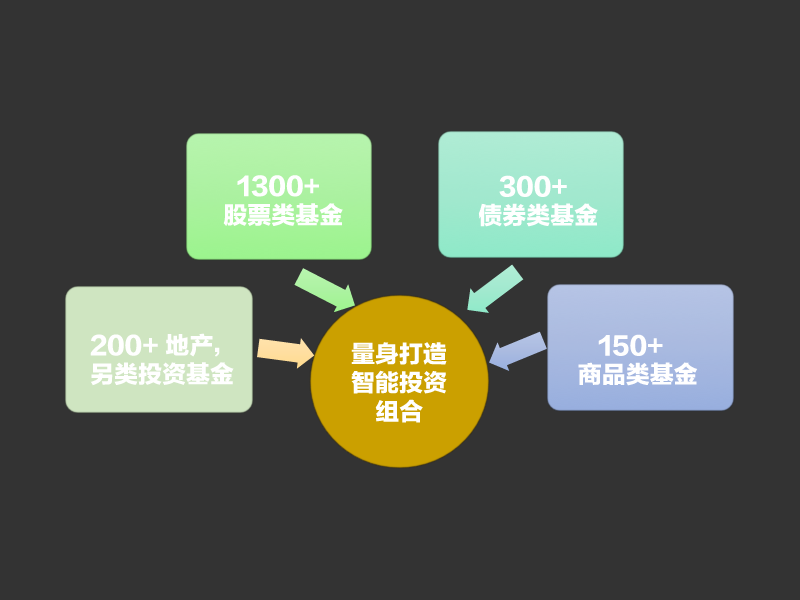
<style>
.page{position:relative;width:800px;height:600px;background:#333333}
.page>*{position:absolute;margin:0}
.t1{font:24px "FZLTTHK--GBK1-0";color:#ffffff}
</style>
<div class="page">
<p class="t1" style="left:223px;top:175px;width:120px;height:51px">1300+<br>股票类基金</p>
<p class="t1" style="left:478px;top:175px;width:120px;height:52px">300+<br>债券类基金</p>
<p class="t1" style="left:90px;top:333px;width:144px;height:53px">200+ 地产，<br>另类投资基金</p>
<p class="t1" style="left:351px;top:342px;width:96px;height:81px">量身打造<br>智能投资<br>    组合</p>
<p class="t1" style="left:578px;top:334px;width:120px;height:52px">150+<br>商品类基金</p>
</div>
